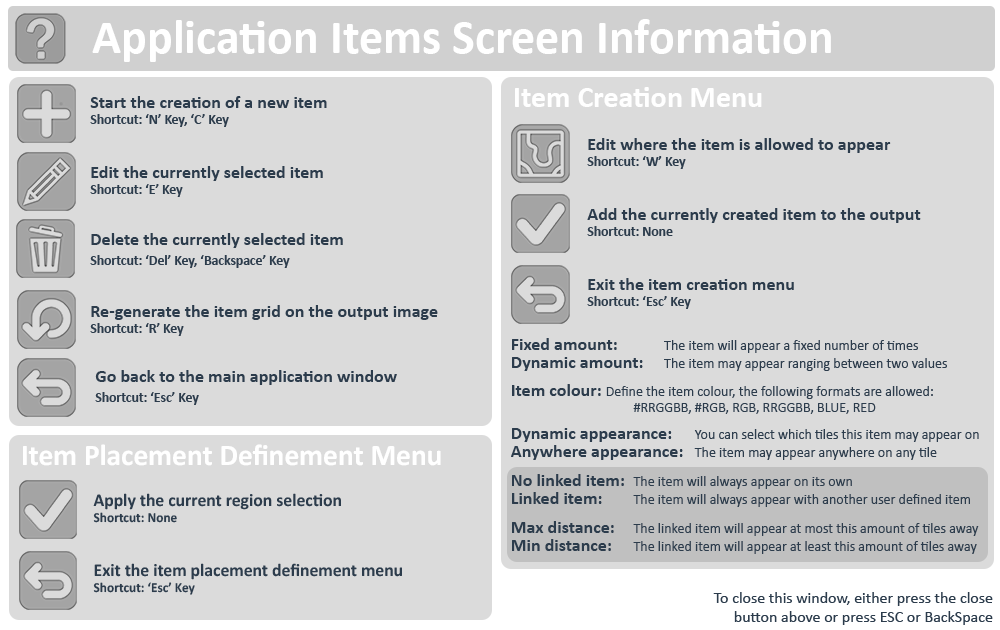
<style>
.page{position:relative;width:1000px;height:630px;background:#dbdbdb}
.page>*{position:absolute;margin:0}
.t1{font:48px "Calibri-Bold";color:#ffffff}
.t2{font:30px "Calibri-Bold";color:#ffffff}
.t3{font:18px "Calibri-Bold";color:#2c3c4c}
.t4{font:13.6px "Calibri-Bold";color:#2c3c4c}
.t5{font:13.6px/20.4px "Calibri-Bold";color:#2c3c4c}
.t6{font:18px/20.4px "Calibri-Bold";color:#2c3c4c}
.t7{font:14px/18px "Calibri";color:#2c3c4c}
.t8{font:18px/18px "Calibri-Bold";color:#2c3c4c}
.t9{font:14px/16px "Calibri";color:#2c3c4c}
.t10{font:18px/16px "Calibri-Bold";color:#2c3c4c}
.t11{font:16px "Calibri";color:#2c3c4c}
</style>
<div class="page">
<p class="t1" style="left:92px;top:19px;width:739px;height:43px">Application Items Screen Information</p>
<p class="t2" style="left:515px;top:87px;width:247px;height:20px">Item Creation Menu</p>
<p class="t3" style="left:90px;top:96px;width:237px;height:31px">Start the creation of a new item<br><span class="t4">Shortcut: ‘N’ Key, ‘C’ Key</span></p>
<p class="t3" style="left:587px;top:138px;width:304px;height:31px">Edit where the item is allowed to appear<br><span class="t4">Shortcut: ‘W’ Key</span></p>
<p class="t3" style="left:90px;top:166px;width:233px;height:31px">Edit the currently selected item<br><span class="t4">Shortcut: ‘E’ Key</span></p>
<p class="t3" style="left:587px;top:208px;width:334px;height:28px">Add the currently created item to the output<br><span class="t4">Shortcut: None</span></p>
<p class="t5" style="left:90px;top:233px;width:253px;height:35px"><span class="t6">Delete the currently selected item<br></span>Shortcut: ‘Del’ Key, ‘Backspace’ Key</p>
<p class="t3" style="left:587px;top:278px;width:207px;height:31px">Exit the item creation menu <br><span class="t4">Shortcut: ‘Esc’ Key</span></p>
<p class="t3" style="left:90px;top:305px;width:348px;height:31px">Re-generate the item grid on the output image<br><span class="t4">Shortcut: ‘R’ Key</span></p>
<p class="t7" style="left:512px;top:338px;width:435px;height:33px"><span class="t8">Fixed amount:     </span>The item will appear a fixed number of times<br><span class="t8">Dynamic amount:  </span>The item may appear ranging between two values</p>
<p class="t6" style="left:95px;top:370px;width:302px;height:35px">Go back to the main application window<br><span class="t5">Shortcut: ‘Esc’ Key</span></p>
<p class="t9" style="left:512px;top:384px;width:421px;height:30px"><span class="t10">Item colour: </span>Define the item colour, the following formats are allowed:<br>    #RRGGBB, #RGB, RGB, RRGGBB, BLUE, RED</p>
<p class="t7" style="left:511px;top:428px;width:468px;height:32px"><span class="t8">Dynamic appearance:    </span>You can select which tiles this item may appear on<br><span class="t8">Anywhere appearance:  </span>The item may appear anywhere on any tile</p>
<p class="t2" style="left:23px;top:444px;width:418px;height:22px">Item Placement Definement Menu</p>
<p class="t7" style="left:512px;top:474px;width:458px;height:33px"><span class="t8">No linked item: </span>The item will always appear on its own<br><span class="t8">Linked item:  </span>The item will always appear with another user defined item</p>
<p class="t3" style="left:93px;top:493px;width:248px;height:30px">Apply the current region selection<br><span class="t4">Shortcut: None</span></p>
<p class="t7" style="left:512px;top:521px;width:467px;height:33px"><span class="t8">Max distance: </span>The linked item will appear at most this amount of tiles away<br><span class="t8">Min distance:  </span>The linked item will appear at least this amount of tiles away</p>
<p class="t3" style="left:93px;top:563px;width:309px;height:32px">Exit the item placement definement menu <br><span class="t4">Shortcut: ‘Esc’ Key</span></p>
<p class="t11" style="left:713px;top:592px;width:280px;height:33px;text-align:right">To close this window, either press the close<br>button above or press ESC or BackSpace</p>
</div>
